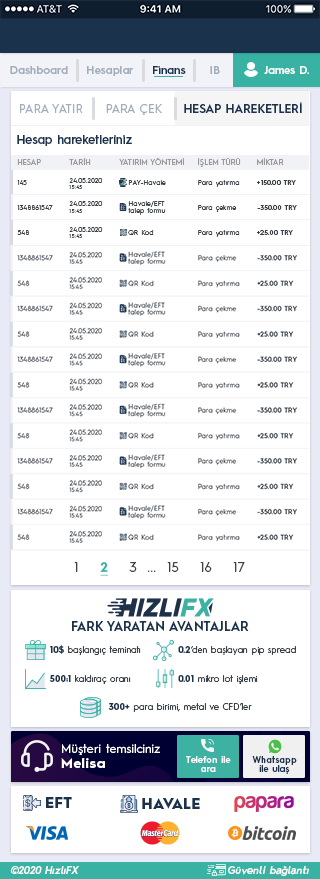
<style>
.page{position:relative;width:320px;height:879px;background:#ffffff}
.page>*{position:absolute;margin:0}
.t1{font:11.1px "HurmeGeometricSans3-SemiBold";color:#a1adbb}
.t2{font:11.1px "HurmeGeometricSans3-SemiBold";color:#1a324c}
.t3{font:11.1px "HurmeGeometricSans3-SemiBold";color:#fefefe}
.t4{font:11.9px "HurmeGeometricSans1-SemiBold";color:#1a324c}
.t5{font:11.9px "HurmeGeometricSans1-Regular";color:#a1adbb}
.t6{font:11.9px "HurmeGeometricSans3-SemiBold";color:#1a324c}
.t7{font:7.7px "HurmeGeometricSans1-Regular";color:#999999}
.t8{font:6.8px "HurmeGeometricSans1-Regular";letter-spacing:0.025em;color:#3a4149}
.t9{font:6.8px/6.4px "HurmeGeometricSans1-Regular";letter-spacing:0.025em;color:#3a4149}
.t10{font:5.5px/6.4px "HurmeGeometricSans1-Regular";letter-spacing:0.025em;color:#3a4149}
.t11{font:6.8px "HurmeGeometricSans1-SemiBold";letter-spacing:0.025em;color:#3a4149}
.t12{font:6.8px/6.8px "HurmeGeometricSans1-Regular";letter-spacing:0.025em;color:#3a4149}
.t13{font:12.8px "HurmeGeometricSans1-Regular";letter-spacing:0.025em;color:#3a4149}
.t14{font:12.8px "HurmeGeometricSans1-Bold";letter-spacing:0.025em;color:#38b2a3;text-decoration:underline}
.t15{font:12.8px "HurmeGeometricSans1-SemiBold";color:#1a324c}
.t16{font:9px "HurmeGeometricSans1-Regular";color:#3a4149}
.t17{font:9px "HurmeGeometricSans1-Bold";color:#1a324c}
.t18{font:11.9px/15.4px "HurmeGeometricSans1-Regular";letter-spacing:0.025em;color:#ffffff}
.t19{font:13.7px/15.4px "HurmeGeometricSans1-Bold";letter-spacing:0.05em;color:#ffffff}
.t20{font:8.9px/8.9px "HurmeGeometricSans3-SemiBold";letter-spacing:0.01em;color:#ffffff}
.t21{font:8.9px/8.9px "HurmeGeometricSans3-SemiBold";letter-spacing:0.01em;color:#1a324c}
.t22{font:14.5px "HurmeGeometricSans1-Black";letter-spacing:0.025em;color:#1a324c}
.t23{font:10.2px "HurmeGeometricSans2-SemiBoldObl";letter-spacing:0.025em;color:#ffffff}
</style>
<div class="page">
<p class="t1" style="left:10px;top:66px;width:58px;height:8px">Dashboard</p>
<p class="t1" style="left:87px;top:66px;width:46px;height:10px">Hesaplar</p>
<p class="t2" style="left:153px;top:66px;width:33px;height:8px">Finans</p>
<p class="t1" style="left:210px;top:66px;width:10px;height:8px">IB</p>
<p class="t3" style="left:264px;top:66px;width:45px;height:8px">James D.</p>
<p class="t4" style="left:184px;top:102px;width:118px;height:11px">HESAP HAREKETLERİ</p>
<p class="t5" style="left:20px;top:104px;width:63px;height:9px">PARA YATIR</p>
<p class="t5" style="left:106px;top:104px;width:56px;height:11px">PARA ÇEK</p>
<p class="t6" style="left:17px;top:135px;width:115px;height:11px">Hesap hareketleriniz</p>
<p class="t7" style="left:17px;top:159px;width:24px;height:6px">HESAP</p>
<p class="t7" style="left:69px;top:158px;width:22px;height:7px">TARİH</p>
<p class="t7" style="left:119px;top:158px;width:65px;height:7px">YATIRIM YÖNTEMİ</p>
<p class="t7" style="left:198px;top:158px;width:43px;height:9px">İŞLEM TÜRÜ</p>
<p class="t7" style="left:257px;top:158px;width:27px;height:7px">MİKTAR</p>
<p class="t8" style="left:17px;top:180px;width:10px;height:5px">145</p>
<p class="t9" style="left:69px;top:178px;width:34px;height:11px">24.05.2020<br><span class="t10">15:45</span></p>
<p class="t8" style="left:128px;top:180px;width:38px;height:5px">PAY-Havale</p>
<p class="t8" style="left:198px;top:180px;width:42px;height:7px">Para yatırma</p>
<p class="t11" style="left:257px;top:180px;width:39px;height:5px">+150.00 TRY</p>
<p class="t8" style="left:17px;top:205px;width:36px;height:5px">1348861547</p>
<p class="t9" style="left:69px;top:201px;width:34px;height:12px">24.05.2020<br><span class="t10">15:45</span></p>
<p class="t12" style="left:128px;top:201px;width:38px;height:14px">Havale/EFT<br>talep formu</p>
<p class="t8" style="left:198px;top:205px;width:39px;height:7px">Para çekme</p>
<p class="t11" style="left:257px;top:205px;width:40px;height:5px">-350.00 TRY</p>
<p class="t8" style="left:17px;top:230px;width:13px;height:5px">548</p>
<p class="t9" style="left:69px;top:227px;width:34px;height:11px">24.05.2020<br><span class="t10">15:45</span></p>
<p class="t8" style="left:128px;top:230px;width:26px;height:5px">QR Kod</p>
<p class="t8" style="left:198px;top:230px;width:42px;height:7px">Para yatırma</p>
<p class="t11" style="left:257px;top:230px;width:36px;height:5px">+25.00 TRY</p>
<p class="t13" style="left:74px;top:562px;width:171px;height:14px">1    <span class="t14">2</span>    3  ...  15    16    17</p>
<p class="t15" style="left:72px;top:621px;width:177px;height:10px">FARK YARATAN AVANTAJLAR</p>
<p class="t16" style="left:50px;top:645px;width:91px;height:10px"><span class="t17">10$</span> başlangıç teminatı</p>
<p class="t16" style="left:178px;top:646px;width:118px;height:9px"><span class="t17">0.2</span>‘den başlayan pip spread</p>
<p class="t16" style="left:49px;top:675px;width:82px;height:9px"><span class="t17">500:1</span> kaldıraç oranı</p>
<p class="t16" style="left:178px;top:675px;width:80px;height:9px"><span class="t17">0.01</span> mikro lot işlemi</p>
<p class="t16" style="left:108px;top:703px;width:144px;height:9px"><span class="t17">300+</span> para birimi, metal ve CFD’ler</p>
<p class="t18" style="left:61px;top:744px;width:99px;height:24px">Müşteri temsilciniz<br><span class="t19">Melisa</span></p>
<p class="t20" style="left:186px;top:756px;width:45px;height:16px;text-align:center">Telefon ile<br>ara</p>
<p class="t21" style="left:252px;top:756px;width:45px;height:18px;text-align:center">Whatsapp<br>ile ulaş</p>
<p class="t22" style="left:46px;top:797px;width:26px;height:11px">EFT</p>
<p class="t22" style="left:142px;top:798px;width:58px;height:11px">HAVALE</p>
<p class="t23" style="left:10px;top:866px;width:69px;height:8px">©2020 HızlıFX</p>
<p class="t23" style="left:228px;top:866px;width:81px;height:10px">Güvenli bağlantı</p>
</div>
